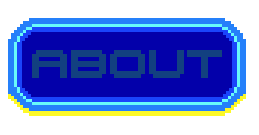
<style>
.page{position:relative;width:259px;height:135px;background:#ffffff}
.page>*{position:absolute;margin:0}
.t1{font:28px "04b20";letter-spacing:0.02em;color:#124080;text-transform:uppercase}
</style>
<div class="page">
<p class="t1" style="left:32px;top:50px;width:190px;height:28px">About</p>
</div>
